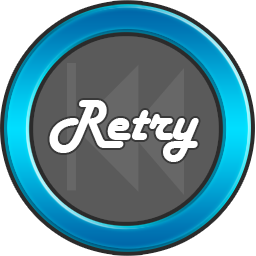
<style>
.page{position:relative;width:256px;height:256px;background:#ffffff}
.page>*{position:absolute;margin:0}
.t1{font:60px "HarlowSolid";color:#ffffff}
</style>
<div class="page">
<p class="t1" style="left:49px;top:100px;width:150px;height:62px">Retry</p>
</div>
